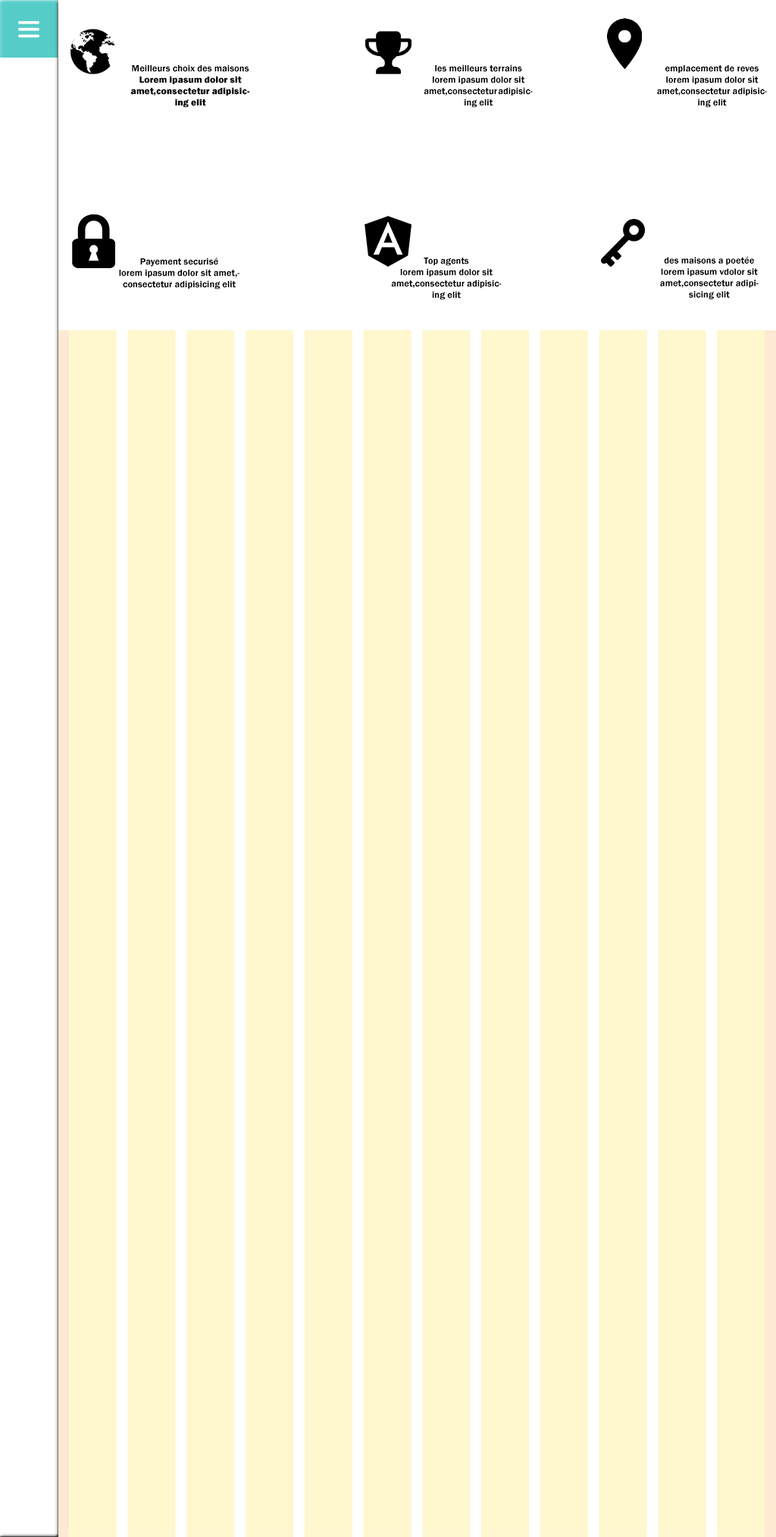
<style>
.page{position:relative;width:776px;height:1537px;background:#fff7ce}
.page>*{position:absolute;margin:0}
.t1{font:9.5px "FranklinGothic-Heavy";color:#000000}
.t2{font:9.5px "FranklinGothic-Demi";color:#000000}
</style>
<div class="page">
<p class="t1" style="left:130px;top:64px;width:120px;height:44px;text-align:center"><span class="t2">Meilleurs choix des maisons<br></span>Lorem ipasum dolor sit amet,consectetur adipisicing elit</p>
<p class="t2" style="left:423px;top:64px;width:110px;height:44px;text-align:center">les meilleurs terrains<br>lorem ipasum dolor sit amet,consectetur adipisicing elit</p>
<p class="t2" style="left:657px;top:65px;width:110px;height:43px;text-align:center">emplacement de reves<br>lorem ipasum dolor sit amet,consectetur adipisicing elit</p>
<p class="t2" style="left:119px;top:258px;width:120px;height:31px;text-align:center">Payement securisé            <br>lorem ipasum dolor sit amet,consectetur adipisicing elit</p>
<p class="t2" style="left:391px;top:258px;width:111px;height:42px;text-align:center">Top agents<br>lorem ipasum dolor sit amet,consectetur adipisicing elit</p>
<p class="t2" style="left:660px;top:256px;width:98px;height:43px;text-align:center">des maisons a poetée<br>lorem ipasum vdolor sit amet,consectetur adipisicing elit</p>
</div>
